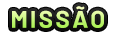
<style>
.page{position:relative;width:116px;height:34px;background:#ffffff}
.page>*{position:absolute;margin:0}
.t1{font:24px "Barlow-Bold";letter-spacing:0.1em}
</style>
<div class="page">
<p class="t1" style="left:12px;top:6px;width:92px;height:22px">MISSÃO</p>
</div>
